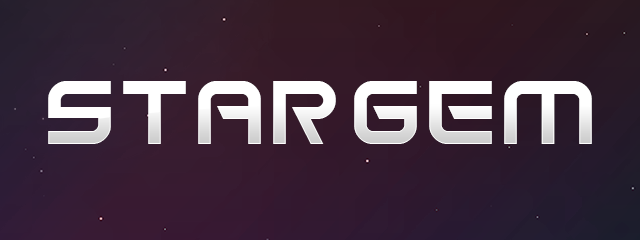
<style>
.page{position:relative;width:640px;height:240px}
.page>*{position:absolute;margin:0}
.t1{font:100px "SpaceFrigate";color:#ffffff}
</style>
<div class="page">
<p class="t1" style="left:48px;top:81px;width:544px;height:63px">Stargem</p>
</div>
